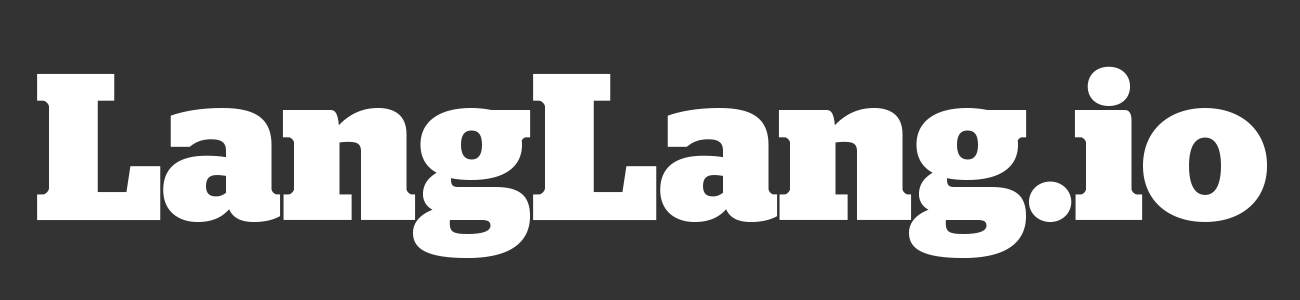
<style>
.page{position:relative;width:1300px;height:300px;background:#333333}
.page>*{position:absolute;margin:0}
.t1{font:208.3px "Stag-Bold";color:#ffffff}
</style>
<div class="page">
<p class="t1" style="left:37px;top:66px;width:1230px;height:193px">LangLang.io</p>
</div>
